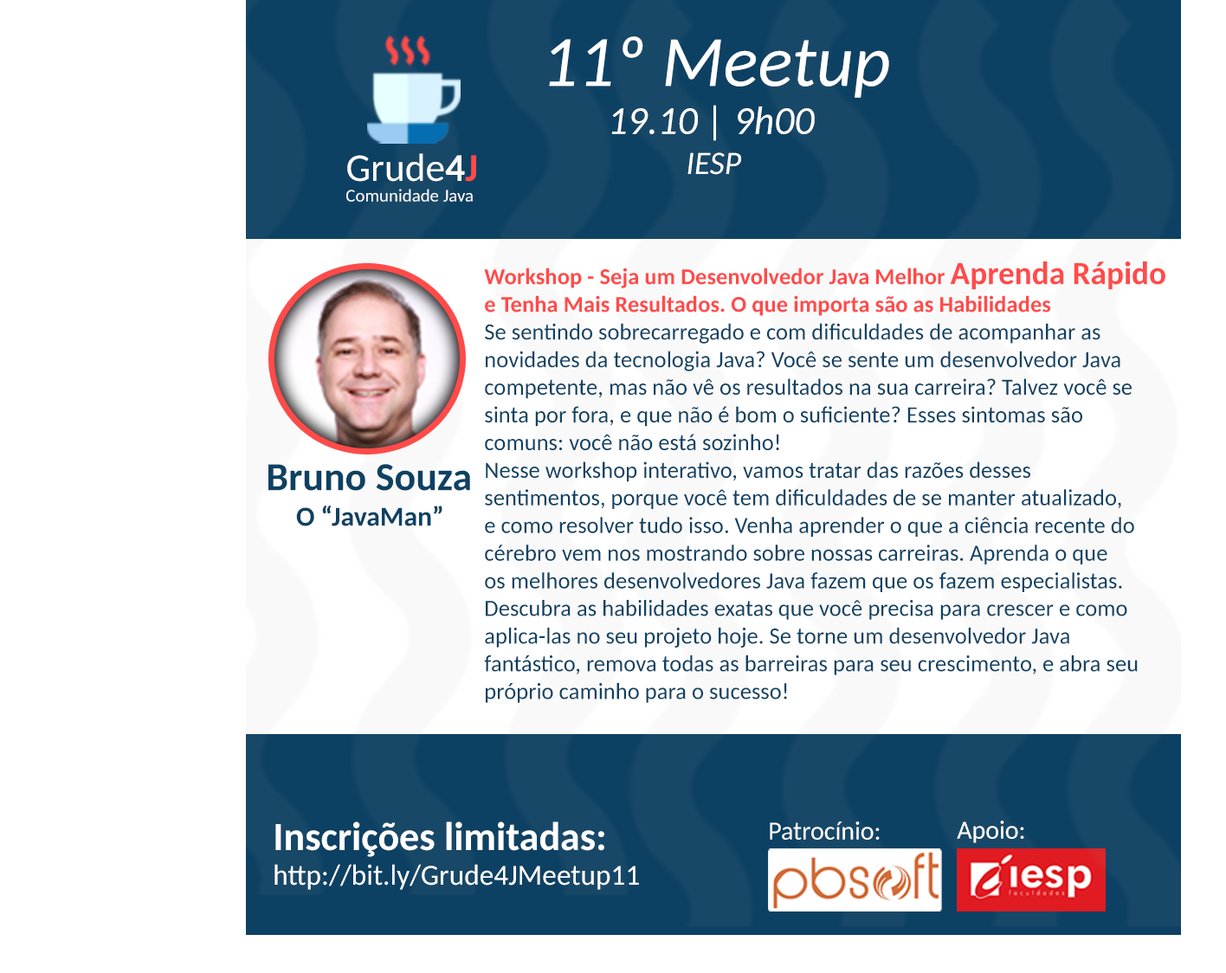
<style>
.page{position:relative;width:1226px;height:973px;background:#ffffff}
.page>*{position:absolute;margin:0}
.t1{font:72.3px "Carlito-Italic";color:#ffffff}
.t2{font:39.6px "Carlito-Italic";color:#ffffff}
.t3{font:39.4px "Carlito";color:#ffffff}
.t4{font:39.4px "Carlito-Bold";color:#ffffff}
.t5{font:39.4px "Carlito-Bold";color:#ff4b4a}
.t6{font:32.4px "Carlito-Italic";color:#ffffff}
.t7{font:18px "Carlito";color:#ffffff}
.t8{font:23px "Carlito";color:#0d4163}
.t9{font:23px "Carlito-Bold";color:#ff4b4a}
.t10{font:32.3px "Carlito-Bold";color:#ff4b4a}
.t11{font:39.7px "Carlito-Bold";color:#0d4163}
.t12{font:27.3px "Carlito-Bold";color:#0d4163}
.t13{font:28.9px "Carlito";color:#ffffff}
.t14{font:39.8px "Carlito-Bold";color:#ffffff}
.t15{font:25.9px "Carlito";color:#fefefe}
.t16{font:25.9px "Carlito";color:#ffffff}
</style>
<div class="page">
<p class="t1" style="left:549px;top:36px;width:340px;height:62px">11º Meetup</p>
<p class="t2" style="left:611px;top:105px;width:204px;height:36px">19.10 | 9h00</p>
<p class="t3" style="left:347px;top:153px;width:129px;height:29px">Grude<span class="t4">4</span><span class="t5">J</span></p>
<p class="t6" style="left:687px;top:152px;width:54px;height:23px">IESP</p>
<p class="t7" style="left:346px;top:189px;width:127px;height:13px">Comunidade Java</p>
<p class="t8" style="left:484px;top:261px;width:681px;height:442px"><span class="t9">Workshop - Seja um Desenvolvedor Java Melhor </span><span class="t10">Aprenda Rápido</span><span class="t9"> <br>e Tenha Mais Resultados. O que importa são as Habilidades <br></span>Se sentindo sobrecarregado e com dificuldades de acompanhar as <br>novidades da tecnologia Java? Você se sente um desenvolvedor Java <br>competente, mas não vê os resultados na sua carreira? Talvez você se <br>sinta por fora, e que não é bom o suficiente? Esses sintomas são <br>comuns: você não está sozinho!<br>Nesse workshop interativo, vamos tratar das razões desses <br>sentimentos, porque você tem dificuldades de se manter atualizado, <br>e como resolver tudo isso. Venha aprender o que a ciência recente do <br>cérebro vem nos mostrando sobre nossas carreiras. Aprenda o que <br>os melhores desenvolvedores Java fazem que os fazem especialistas. <br>Descubra as habilidades exatas que você precisa para crescer e como <br>aplica-las no seu projeto hoje. Se torne um desenvolvedor Java <br>fantástico, remova todas as barreiras para seu crescimento, e abra seu <br>próprio caminho para o sucesso!</p>
<p class="t11" style="left:268px;top:464px;width:202px;height:27px">Bruno Souza</p>
<p class="t12" style="left:296px;top:505px;width:146px;height:21px">O “JavaMan”</p>
<p class="t13" style="left:274px;top:821px;width:365px;height:69px"><span class="t14">Inscrições limitadas:<br></span>http://bit.ly/Grude4JMeetup11</p>
<p class="t15" style="left:769px;top:821px;width:110px;height:19px">Patrocínio:</p>
<p class="t16" style="left:956px;top:821px;width:68px;height:22px">Apoio:</p>
</div>
